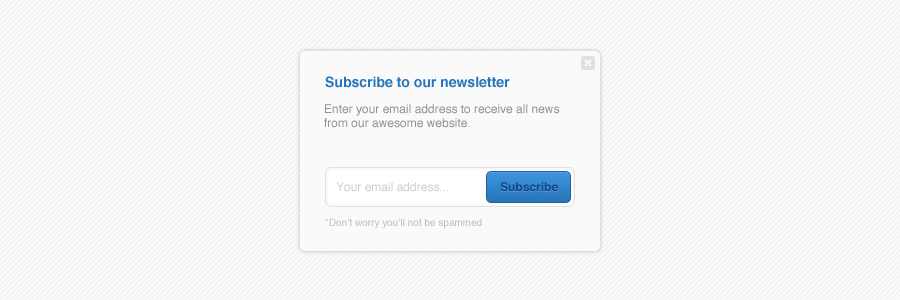
<style>
.page{position:relative;width:900px;height:300px;background:#f9f9f9}
.page>*{position:absolute;margin:0}
.t1{font:14px "Helvetica-Bold";color:#2776ba}
.t2{font:12px "Helvetica";color:#909090}
.t3{font:12px "Helvetica";color:#cccccc}
.t4{font:12px "Helvetica-Bold";color:#164680}
.t5{font:10px "Helvetica";color:#bfbfbf}
</style>
<div class="page">
<p class="t1" style="left:325px;top:76px;width:185px;height:12px">Subscribe to our newsletter</p>
<p class="t2" style="left:324px;top:104px;width:236px;height:24px">Enter your email address to receive all news<br>from our awesome website.</p>
<p class="t3" style="left:336px;top:182px;width:112px;height:10px">Your email address...</p>
<p class="t4" style="left:500px;top:182px;width:58px;height:10px">Subscribe</p>
<p class="t5" style="left:325px;top:218px;width:157px;height:10px">*Don’t worry you’ll not be spammed</p>
</div>
